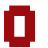
<style>
.page{position:relative;width:48px;height:48px;background:#ffffff}
.page>*{position:absolute;margin:0}
.t1{font:72px "EditUndoBRK";color:#9e0b0f}
</style>
<div class="page">
<p class="t1" style="left:4px;top:5px;width:31px;height:42px">O</p>
</div>
